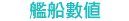
<style>
.page{position:relative;width:129px;height:21px;background:#ffffff}
.page>*{position:absolute;margin:0}
.t1{font:18px "GothicMB101Pr6N-Medium";color:#1dbdc0}
.t2{font:18px "AdobeFanHeitiStd-Bold";color:#1dbdc0}
</style>
<div class="page">
<p class="t1" style="left:29px;top:1px;width:72px;height:18px">艦船數<span class="t2">值</span></p>
</div>
